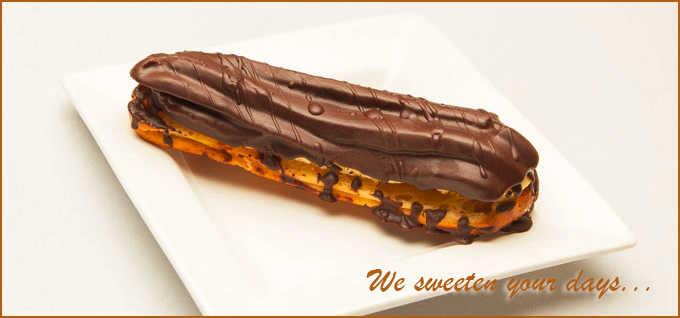
<style>
.page{position:relative;width:680px;height:318px}
.page>*{position:absolute;margin:0}
.t1{font:36px "BrushScriptMT";color:#b15e0e}
</style>
<div class="page">
<p class="t1" style="left:366px;top:269px;width:284px;height:30px">We sweeten your days...</p>
</div>
